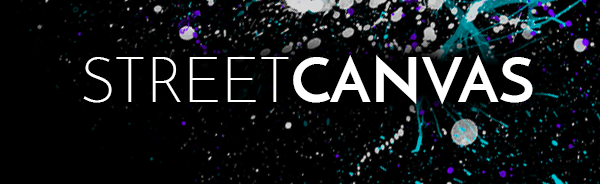
<style>
.page{position:relative;width:600px;height:184px;background:#000000}
.page>*{position:absolute;margin:0}
.t1{font:62.2px "JosefinSans-Light";color:#ffffff}
.t2{font:62.2px "JosefinSans-Bold";color:#ffffff}
</style>
<div class="page">
<p class="t1" style="left:83px;top:55px;width:450px;height:50px">STREET<span class="t2">CANVAS</span></p>
</div>
